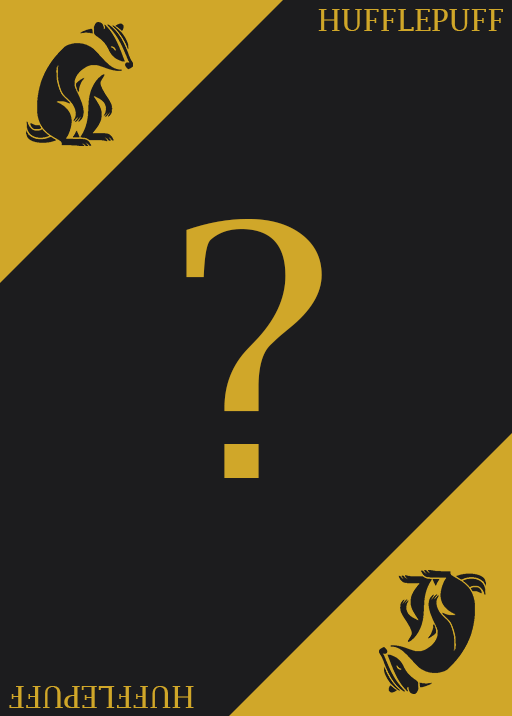
<style>
.page{position:relative;width:512px;height:716px;background:#1c1c1e}
.page>*{position:absolute;margin:0}
.t1{font:30px "LucidaFax";color:#d0a729}
.t2{font:350px "LucidaBright";color:#d0a729}
</style>
<div class="page">
<p class="t1" style="left:318px;top:9px;width:185px;height:22px">HUFFLEPUFF</p>
<p class="t2" style="left:186px;top:219px;width:136px;height:259px">?</p>
<p class="t1" style="left:9px;top:686px;width:185px;height:22px;rotate:180deg">HUFFLEPUFF</p>
</div>
